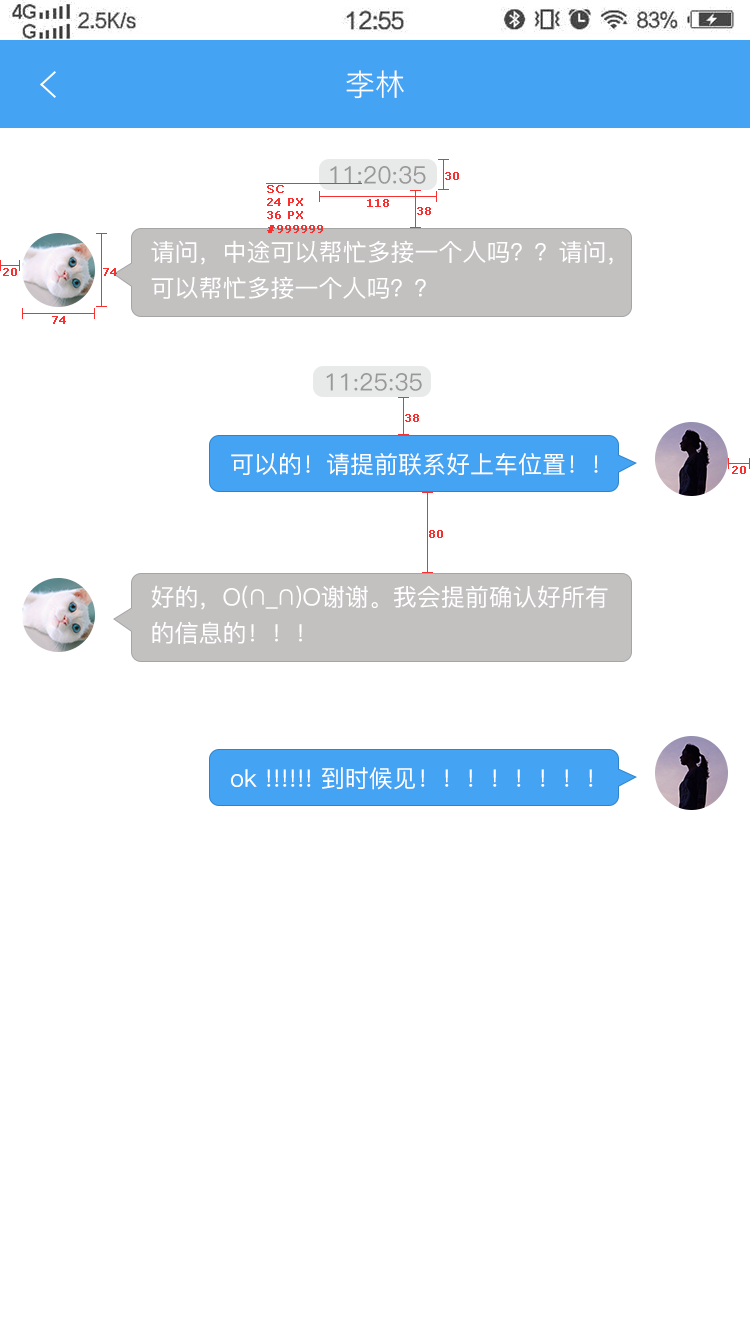
<style>
.page{position:relative;width:750px;height:1334px;background:#ffffff}
.page>*{position:absolute;margin:0}
.t1{font:30px "PingFang-SC-Regular";color:#ffffff;text-transform:uppercase}
.t2{font:24px "PingFang-SC-Medium";color:#999999}
.t3{font:11px "Verdana";color:#f83030;font-weight:bold}
.t4{font:24px/36px "PingFang-SC-Medium";color:#ffffff}
.t5{font:24px "PingFang-SC-Medium";color:#ffffff}
</style>
<div class="page">
<p class="t1" style="left:346px;top:70px;width:58px;height:29px">李林</p>
<p class="t2" style="left:330px;top:166px;width:96px;height:18px">11:20:35</p>
<p class="t3" style="left:445px;top:172px;width:14px;height:8px">30</p>
<p class="t3" style="left:267px;top:185px;width:56px;height:48px">SC<br>24 PX<br>36 PX<br>#999999</p>
<p class="t3" style="left:367px;top:199px;width:22px;height:8px">118</p>
<p class="t3" style="left:417px;top:207px;width:14px;height:8px">38</p>
<p class="t4" style="left:151px;top:240px;width:527px;height:59px">请问，中途可以帮忙多接一个人吗？？请问，中途<br>可以帮忙多接一个人吗？？</p>
<p class="t3" style="left:3px;top:268px;width:14px;height:8px">20</p>
<p class="t3" style="left:103px;top:268px;width:14px;height:8px">74</p>
<p class="t3" style="left:52px;top:316px;width:14px;height:8px">74</p>
<p class="t2" style="left:326px;top:373px;width:96px;height:18px">11:25:35</p>
<p class="t3" style="left:405px;top:414px;width:14px;height:8px">38</p>
<p class="t5" style="left:231px;top:453px;width:367px;height:23px">可以的！请提前联系好上车位置！！</p>
<p class="t3" style="left:732px;top:466px;width:14px;height:8px">20</p>
<p class="t3" style="left:429px;top:530px;width:14px;height:8px">80</p>
<p class="t4" style="left:151px;top:585px;width:457px;height:59px">好的，O(∩_∩)O谢谢。我会提前确认好所有<br>的信息的！！！</p>
<p class="t5" style="left:231px;top:767px;width:362px;height:23px">ok !!!!!! 到时候见！！！！！！！！</p>
</div>
